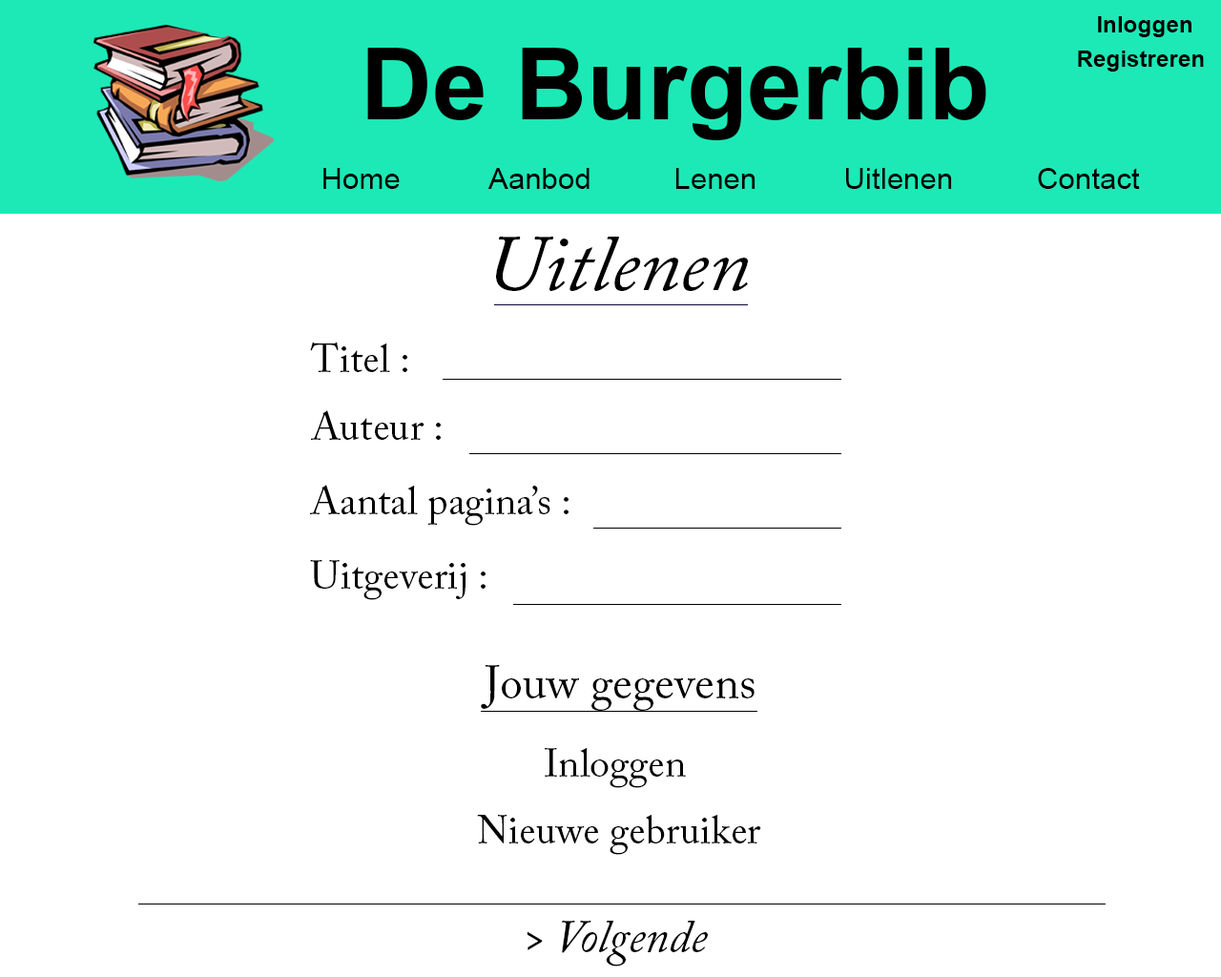
<style>
.page{position:relative;width:1221px;height:977px;background:#ffffff}
.page>*{position:absolute;margin:0}
.t1{font:23.2px "Arial-BoldMT";color:#000000}
.t2{font:99.4px "Arial-BoldMT";color:#000000}
.t3{font:29.8px "ArialMT";color:#000000}
.t4{font:79.5px "ACaslonPro-Italic";color:#000000}
.t5{font:39.7px "ACaslonPro-Regular";color:#000000}
.t6{font:11.4px/238.5px "ACaslonPro-Regular";color:#000000}
.t7{font:46.4px "ACaslonPro-Regular";color:#000000}
.t8{font:46.4px "ACaslonPro-Italic";color:#000000}
</style>
<div class="page">
<p class="t1" style="left:1098px;top:16px;width:93px;height:21px">Inloggen</p>
<p class="t2" style="left:367px;top:48px;width:619px;height:92px">De Burgerbib</p>
<p class="t1" style="left:1078px;top:51px;width:126px;height:21px">Registreren</p>
<p class="t3" style="left:323px;top:168px;width:77px;height:21px">Home</p>
<p class="t3" style="left:487px;top:168px;width:102px;height:21px">Aanbod</p>
<p class="t3" style="left:675px;top:168px;width:80px;height:21px">Lenen</p>
<p class="t3" style="left:846px;top:168px;width:106px;height:21px">Uitlenen</p>
<p class="t3" style="left:1038px;top:168px;width:102px;height:21px">Contact</p>
<p class="t4" style="left:496px;top:237px;width:252px;height:54px">Uitlenen</p>
<p class="t5" style="left:310px;top:341px;width:97px;height:31px">Titel :</p>
<p class="t6" style="left:311px;top:410px;width:130px;height:30px">Auteur :</p>
<p class="t6" style="left:310px;top:485px;width:258px;height:41px">Aantal pagina’s :</p>
<p class="t6" style="left:310px;top:560px;width:175px;height:40px">Uitgeverij :</p>
<p class="t7" style="left:481px;top:665px;width:273px;height:46px">Jouw gegevens</p>
<p class="t5" style="left:545px;top:748px;width:141px;height:40px">Inloggen</p>
<p class="t6" style="left:477px;top:815px;width:284px;height:40px">Nieuwe gebruiker</p>
<p class="t8" style="left:527px;top:920px;width:181px;height:46px">&gt; Volgende</p>
</div>
